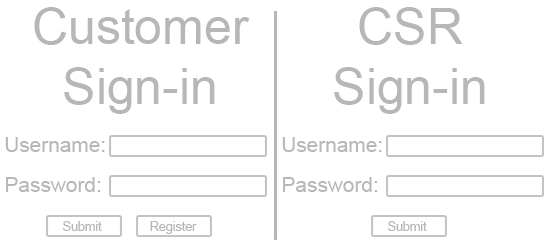
<style>
.page{position:relative;width:550px;height:250px;background:#ffffff}
.page>*{position:absolute;margin:0}
.t1{font:50px "ArialMT";color:#b7b7b7}
.t2{font:12px "ArialMT";color:#b7b7b7}
.t3{font:20.8px "ArialMT";color:#b7b7b7}
.t4{font:12.5px "ArialMT";color:#b7b7b7}
</style>
<div class="page">
<p class="t1" style="left:34px;top:7px;width:216px;height:107px;text-align:center">Customer<br>Sign-in</p>
<p class="t2" style="left:334px;top:7px;width:151px;height:107px;text-align:center">CSR<br>Sign-in</p>
<p class="t3" style="left:5px;top:137px;width:100px;height:15px">Username:</p>
<p class="t3" style="left:282px;top:137px;width:100px;height:15px">Username:</p>
<p class="t3" style="left:6px;top:177px;width:95px;height:15px">Password:</p>
<p class="t3" style="left:283px;top:177px;width:95px;height:15px">Password:</p>
<p class="t4" style="left:63px;top:221px;width:39px;height:10px">Submit</p>
<p class="t4" style="left:150px;top:221px;width:47px;height:13px">Register</p>
<p class="t4" style="left:388px;top:221px;width:39px;height:10px">Submit</p>
</div>
